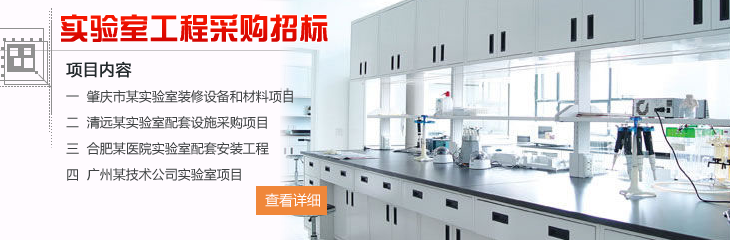
<style>
.page{position:relative;width:730px;height:240px;background:#fffbff}
.page>*{position:absolute;margin:0}
.t1{font:30px "DFZongYi-Bd-80-Win-GB";color:#e60d00}
.t2{font:13px/26px "MicrosoftYaHei";color:#3e4142}
.t3{font:16px/24px "MicrosoftYaHei";color:#23292c;font-weight:bold}
.t4{font:14px "MicrosoftYaHei";color:#fffbff}
</style>
<div class="page">
<p class="t1" style="left:61px;top:14px;width:267px;height:28px">实验室工程采购招标</p>
<p class="t2" style="left:66px;top:61px;width:227px;height:120px"><span class="t3">项目内容<br></span>一  肇庆市某实验室装修设备和材料项目<br>二  清远某实验室配套设施采购项目<br>三  合肥某医院实验室配套安装工程<br>四  广州某技术公司实验室项目</p>
<p class="t4" style="left:265px;top:193px;width:55px;height:14px">查看详细</p>
</div>
